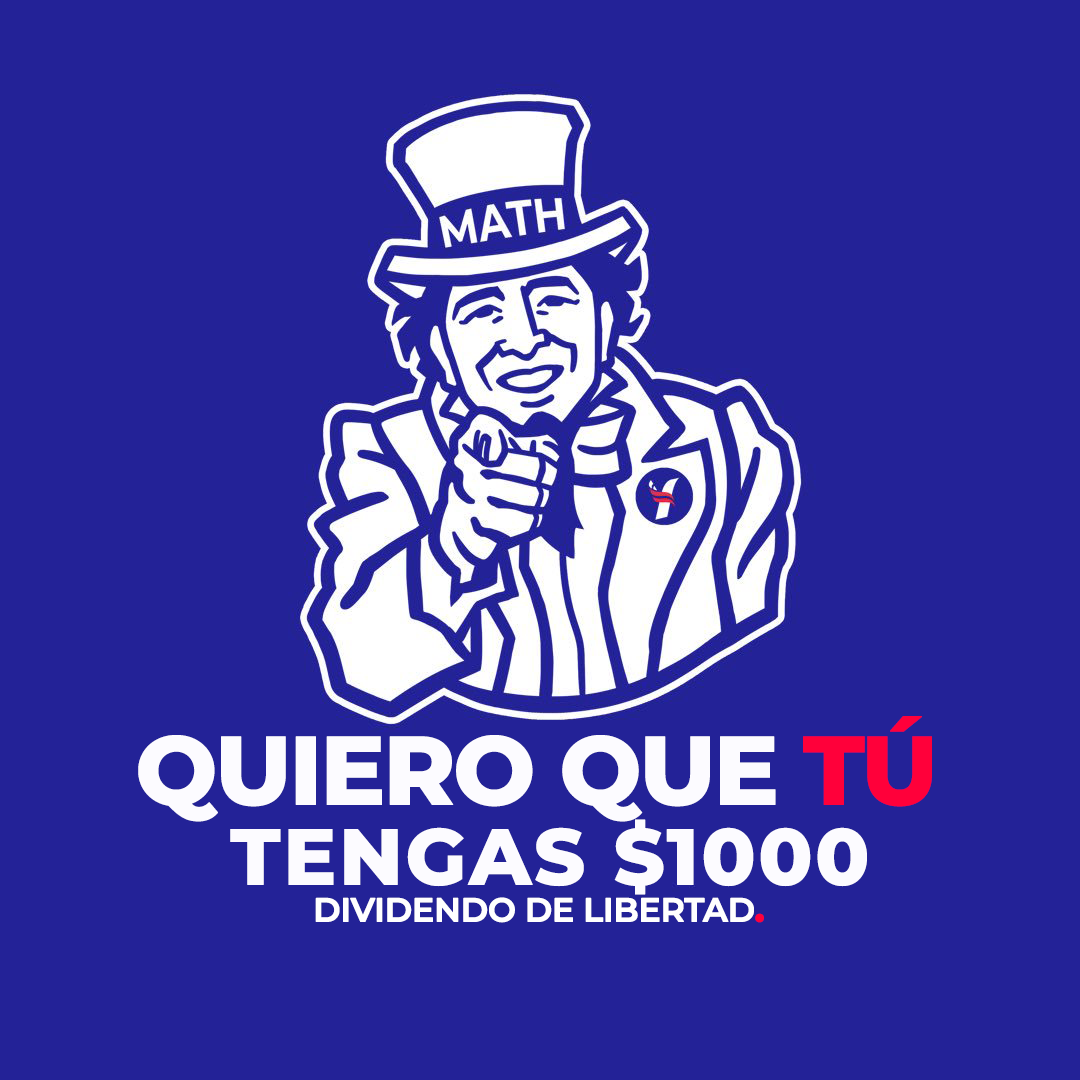
<style>
.page{position:relative;width:1080px;height:1080px;background:#232297}
.page>*{position:absolute;margin:0}
.t1{font:79px/80px "Montserrat-ExtraBold";letter-spacing:0.008em;color:#fcfbff;font-weight:bold}
.t2{font:97px/80px "Montserrat-ExtraBold";letter-spacing:-0.048em;color:#fcfbff;font-weight:bold}
.t3{font:97px/80px "Montserrat-ExtraBold";letter-spacing:-0.048em;color:#ff003a;font-weight:bold}
.t4{font:97px/80px "Montserrat-ExtraBold";letter-spacing:0.008em;color:#fcfbff;font-weight:bold}
.t5{font:33px "Montserrat-SemiBold";letter-spacing:-0.028em;color:#ffffff;font-weight:bold}
.t6{font:33px "Montserrat-ExtraBold";letter-spacing:-0.028em;color:#ff003a;font-weight:bold}
</style>
<div class="page">
<p class="t1" style="left:138px;top:716px;width:794px;height:179px;text-align:center"><span class="t2">QUIERO QUE </span><span class="t3">TÚ</span><span class="t4"> <br></span>TENGAS $1000</p>
<p class="t5" style="left:315px;top:897px;width:449px;height:26px">DIVIDENDO DE LIBERTAD<span class="t6">.</span></p>
</div>
